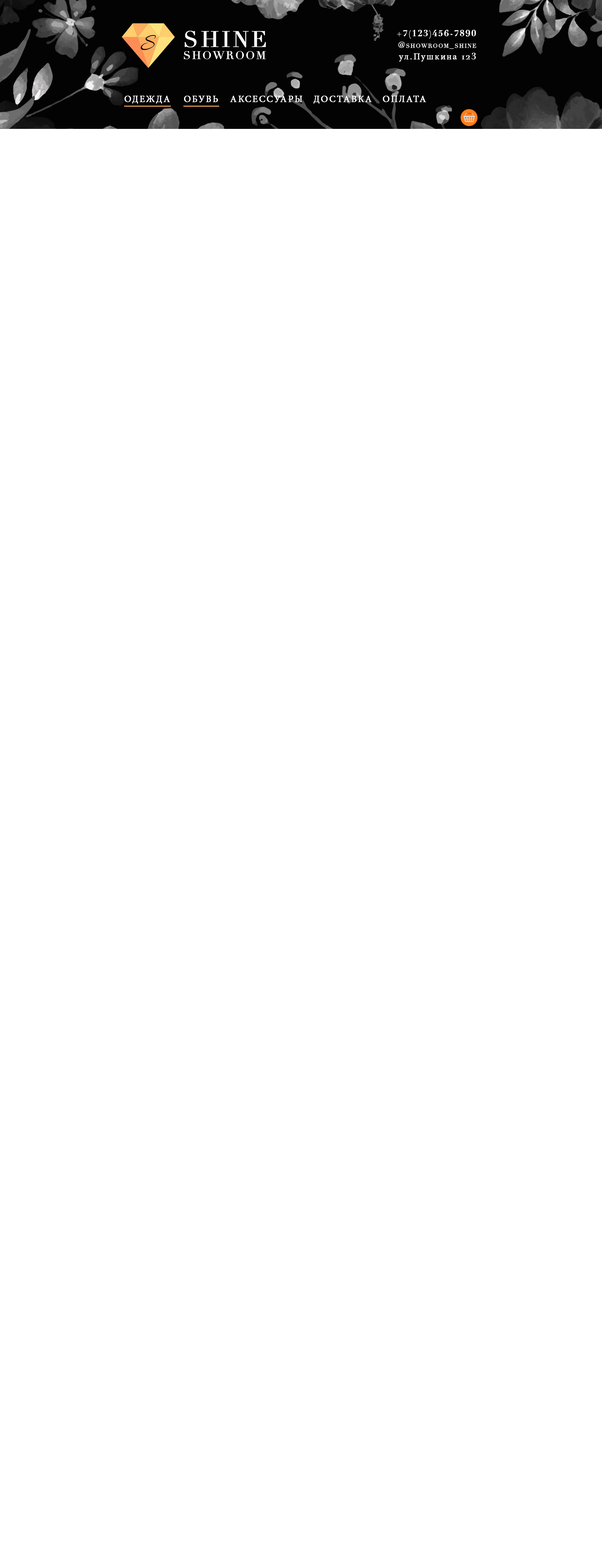
<style>
.page{position:relative;width:602px;height:1568px;background:#ffffff}
.page>*{position:absolute;margin:0}
.t1{font:8.5px "Didot-Bold";letter-spacing:0.1em;color:#fbf9f9;font-variant:small-caps;font-weight:bold}
.t2{font:23.8px "Allura-Regular";letter-spacing:0.1em;color:#030303;text-transform:uppercase}
.t3{font:15.7px/12.2px "Didot";letter-spacing:0.1em;color:#fbf9f9;font-variant:small-caps;font-weight:bold}
.t4{font:22px/23.2px "Didot";letter-spacing:0.1em;color:#fbf9f9;font-variant:small-caps;font-weight:bold}
.t5{font:8.2px "Didot";letter-spacing:0.1em;color:#fbf9f9;font-variant:small-caps;font-weight:bold}
.t6{font:9.1px "MinionPro-Regular";letter-spacing:0.1em;color:#fbf9f9;font-variant:small-caps;font-weight:bold}
.t7{font:9.1px "Didot";letter-spacing:0.1em;color:#fbf9f9;font-variant:small-caps;font-weight:bold}
.t8{font:9.4px "MinionPro-Regular";letter-spacing:0.1em;color:#fdfdfd;text-transform:uppercase;font-weight:bold}
</style>
<div class="page">
<p class="t1" style="left:397px;top:30px;width:79px;height:9px">+7(123)456-7890</p>
<p class="t2" style="left:141px;top:35px;width:15px;height:15px">S</p>
<p class="t3" style="left:184px;top:31px;width:82px;height:28px"><span class="t4">SHINE<br></span>showroom</p>
<p class="t5" style="left:398px;top:42px;width:78px;height:7px">@showroom_shine</p>
<p class="t6" style="left:399px;top:53px;width:77px;height:9px">ул<span class="t7">.</span>Пушкина<span class="t7"> 123</span></p>
<p class="t8" style="left:124px;top:96px;width:46px;height:8px">одежда</p>
<p class="t8" style="left:184px;top:96px;width:34px;height:7px">обувь</p>
<p class="t8" style="left:230px;top:96px;width:72px;height:7px">аксессуары</p>
<p class="t8" style="left:314px;top:95px;width:58px;height:9px">доставка</p>
<p class="t8" style="left:383px;top:95px;width:43px;height:7px">оплата</p>
</div>
